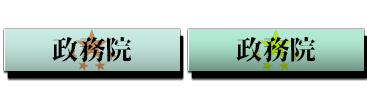
<style>
.page{position:relative;width:367px;height:98px;background:#ffffff}
.page>*{position:absolute;margin:0}
.t1{font:26.7px "SoukouMincho";color:#000000}
</style>
<div class="page">
<p class="t1" style="left:52px;top:37px;width:80px;height:25px">政務院</p>
<p class="t1" style="left:236px;top:37px;width:80px;height:25px">政務院</p>
</div>
